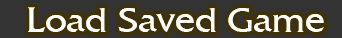
<style>
.page{position:relative;width:342px;height:38px;background:#333333}
.page>*{position:absolute;margin:0}
.t1{font:35.6px "FrizQuadrataITCbyBT-Roman";color:#fefefe}
</style>
<div class="page">
<p class="t1" style="left:28px;top:7px;width:296px;height:25px">Load Saved Game</p>
</div>
